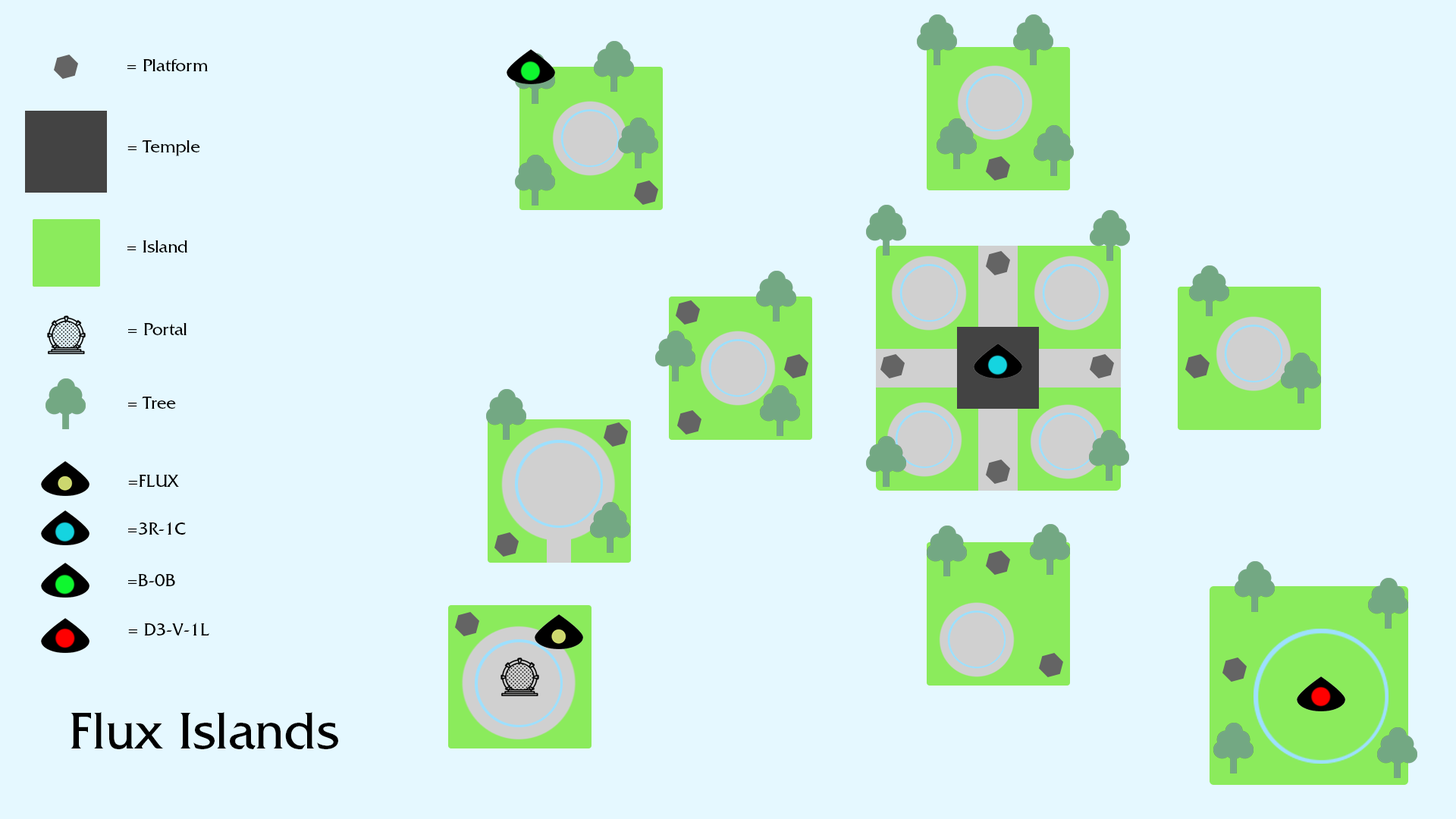
<style>
.page{position:relative;width:1456px;height:819px;background:#e5f8ff}
.page>*{position:absolute;margin:0}
.t1{font:18.2px "FrizQuadrataStd";color:#000000}
.t2{font:54.6px "FrizQuadrataStd";color:#000000}
</style>
<div class="page">
<p class="t1" style="left:127px;top:58px;width:81px;height:13px">= Platform</p>
<p class="t1" style="left:127px;top:140px;width:73px;height:16px">= Temple</p>
<p class="t1" style="left:127px;top:240px;width:61px;height:13px">= Island</p>
<p class="t1" style="left:128px;top:323px;width:59px;height:12px">= Portal</p>
<p class="t1" style="left:128px;top:397px;width:48px;height:12px">= Tree</p>
<p class="t1" style="left:128px;top:475px;width:52px;height:12px">=FLUX</p>
<p class="t1" style="left:128px;top:522px;width:58px;height:13px">=3R-1C</p>
<p class="t1" style="left:128px;top:574px;width:47px;height:12px">=B-0B</p>
<p class="t1" style="left:128px;top:623px;width:81px;height:13px">= D3-V-1L</p>
<p class="t2" style="left:71px;top:712px;width:267px;height:37px">Flux Islands</p>
</div>
